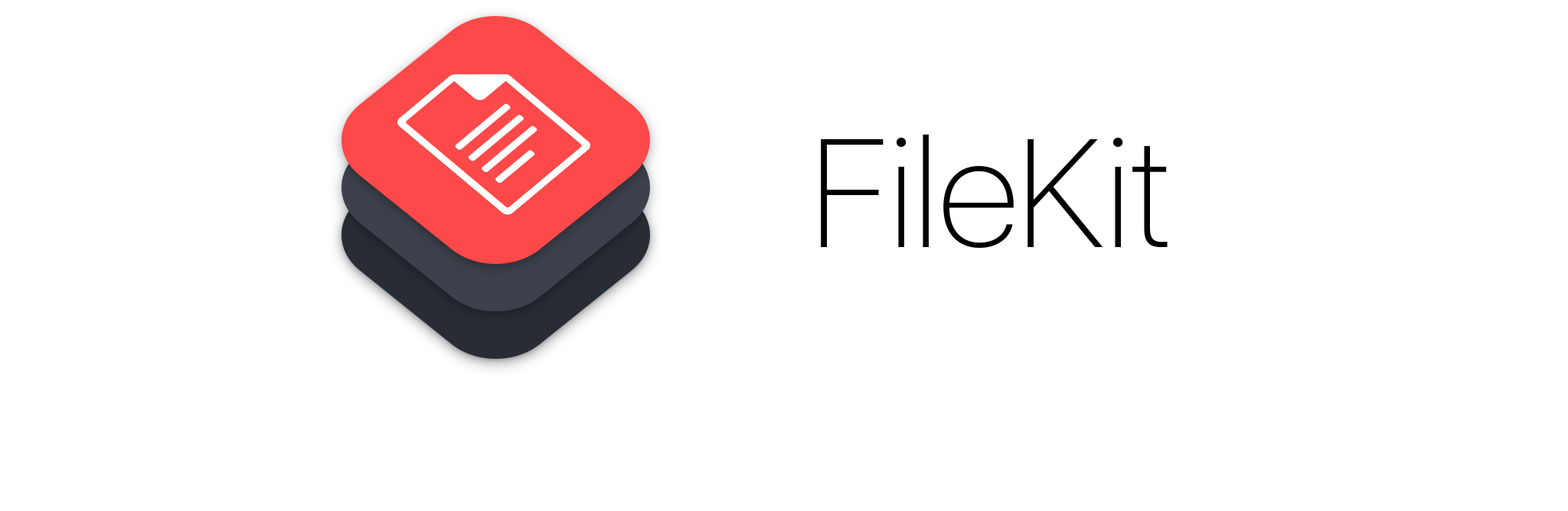
<style>
.page{position:relative;width:1568px;height:511px;background:#ffffff}
.page>*{position:absolute;margin:0}
.t1{font:153.1px "SFUIDisplay-Thin";color:#000000}
</style>
<div class="page">
<p class="t1" style="left:821px;top:134px;width:347px;height:114px">FileKit</p>
</div>
